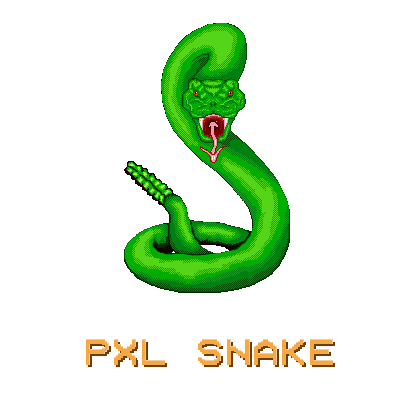
<style>
.page{position:relative;width:420px;height:420px;background:#ffffff}
.page>*{position:absolute;margin:0}
.t1{font:36.4px "ModeSeven";color:#f8a840}
.t2{font:36.4px "ModeSeven"}
</style>
<div class="page">
<p class="t1" style="left:86px;top:340px;width:247px;height:25px">PXL SNAKE</p>
<p class="t2" style="left:88px;top:342px;width:247px;height:25px">PXL SNAKE</p>
</div>
